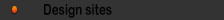
<style>
.page{position:relative;width:224px;height:20px;background:#333333}
.page>*{position:absolute;margin:0}
.t1{font:14.9px "ArialRoundedMTBold";color:#030303;scale:0.78 1}
</style>
<div class="page">
<p class="t1" style="left:44px;top:4px;width:68px;height:14px">Design sites</p>
</div>
